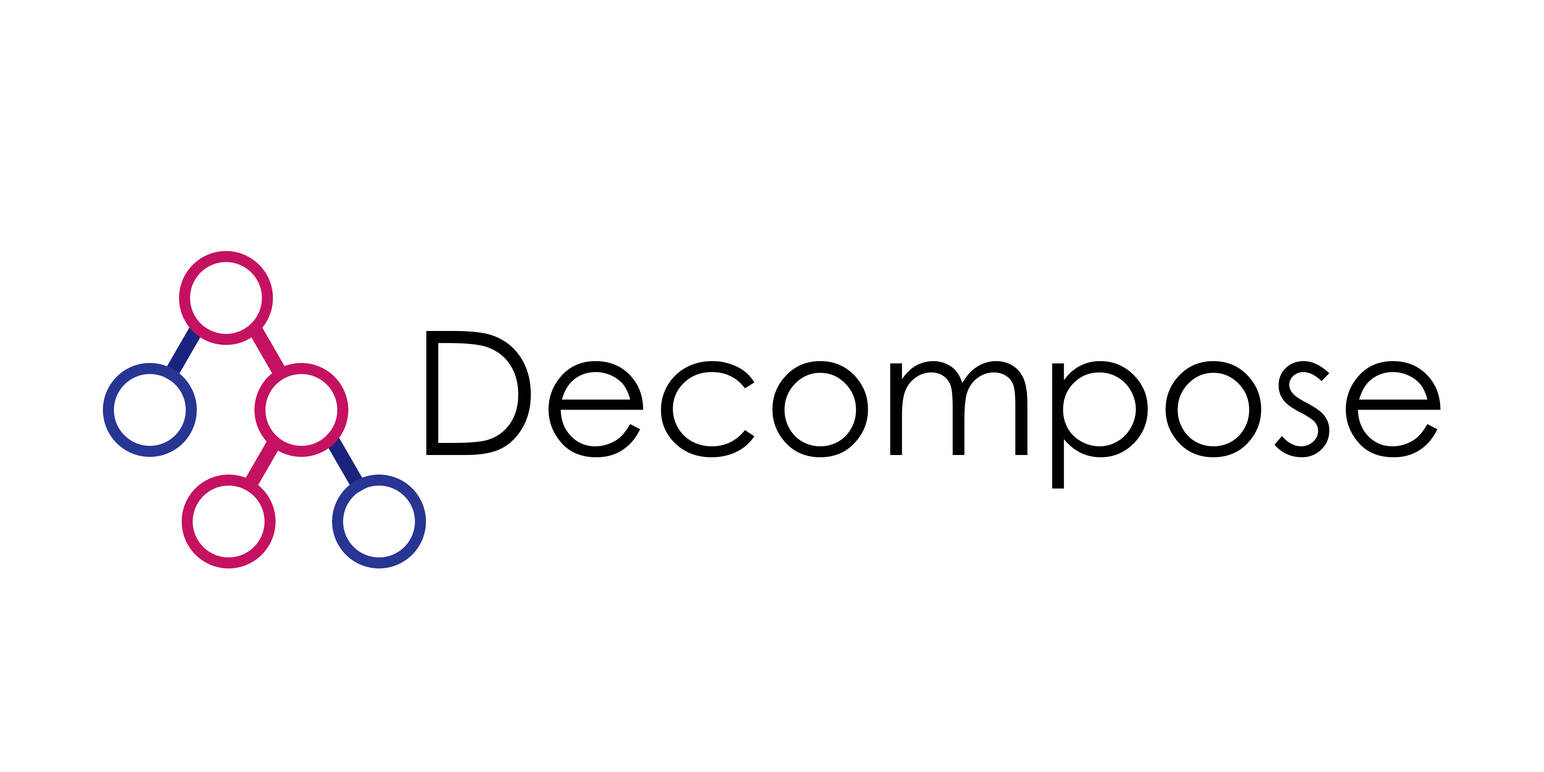
<style>
.page{position:relative;width:1544px;height:772px;background:#ffffff}
.page>*{position:absolute;margin:0}
.t1{font:172.8px "CenturyGothic";color:#000000}
</style>
<div class="page">
<p class="t1" style="left:426px;top:331px;width:1015px;height:158px">Decompose</p>
</div>
